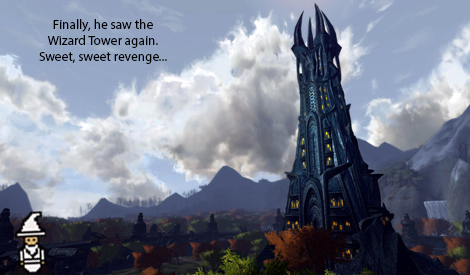
<style>
.page{position:relative;width:470px;height:275px}
.page>*{position:absolute;margin:0}
.t1{font:13.3px "MyriadPro-Regular";color:#000000}
</style>
<div class="page">
<p class="t1" style="left:39px;top:19px;width:128px;height:45px;text-align:center">Finally, he saw the<br>Wizard Tower again.<br>Sweet, sweet revenge...</p>
</div>
